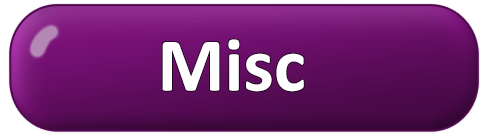
<style>
.page{position:relative;width:487px;height:135px}
.page>*{position:absolute;margin:0}
.t1{font:76.7px "Calibri-Bold";color:#ffffff}
</style>
<div class="page">
<p class="t1" style="left:162px;top:39px;width:142px;height:53px">Misc</p>
</div>
